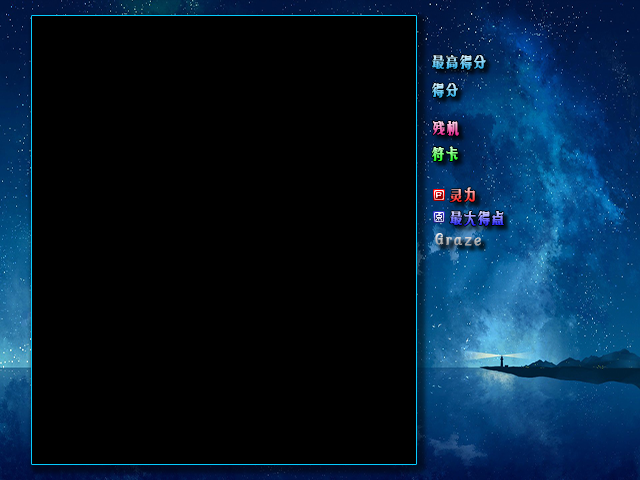
<style>
.page{position:relative;width:640px;height:480px;background:#000000}
.page>*{position:absolute;margin:0}
.t1{font:14px "MFMiaoMiao_Noncommercial-Regular";letter-spacing:0.15em;font-weight:bold}
</style>
<div class="page">
<p class="t1" style="left:432px;top:55px;width:54px;height:15px">最高得分</p>
<p class="t1" style="left:432px;top:83px;width:26px;height:15px">得分</p>
<p class="t1" style="left:433px;top:121px;width:26px;height:15px">残机</p>
<p class="t1" style="left:432px;top:146px;width:26px;height:15px">符卡</p>
<p class="t1" style="left:450px;top:187px;width:25px;height:15px">灵力</p>
<p class="t1" style="left:450px;top:211px;width:54px;height:15px">最大得点</p>
<p class="t1" style="left:435px;top:233px;width:46px;height:13px">Graze</p>
</div>
